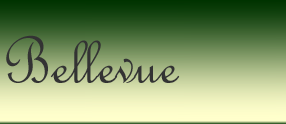
<style>
.page{position:relative;width:286px;height:124px}
.page>*{position:absolute;margin:0}
.t1{font:71.7px "FrenchScriptMT";color:#333333}
</style>
<div class="page">
<p class="t1" style="left:6px;top:35px;width:174px;height:48px">Bellevue</p>
</div>
